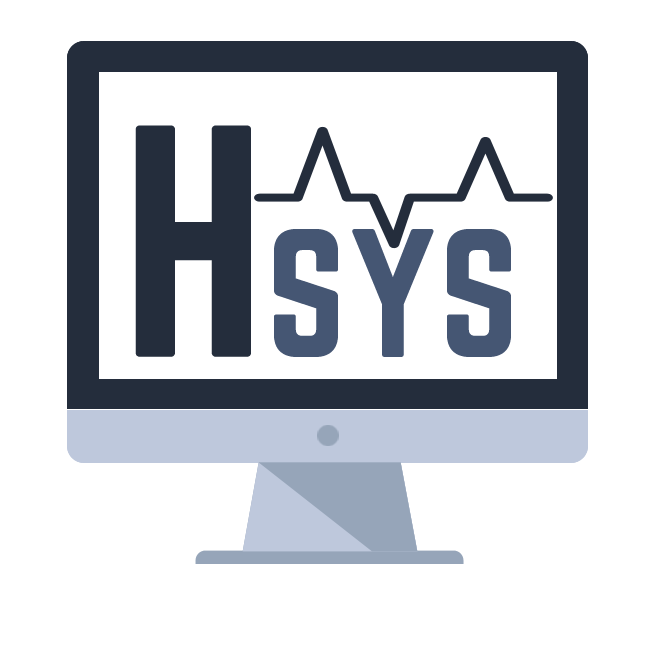
<style>
.page{position:relative;width:650px;height:650px;background:#ffffff}
.page>*{position:absolute;margin:0}
.t1{font:160px "Norwester-Regular";letter-spacing:0.04em;color:#455673}
.t2{font:289px "Norwester-Regular";color:#242d3c}
</style>
<div class="page">
<p class="t1" style="left:135px;top:125px;width:376px;height:232px"><span class="t2">H</span>SYS</p>
</div>
